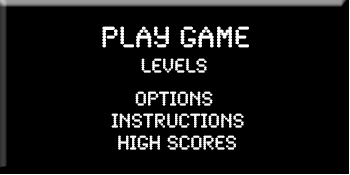
<style>
.page{position:relative;width:350px;height:175px;background:#000000}
.page>*{position:absolute;margin:0}
.t1{font:30px "SynchroLET";color:#ffffff}
.t2{font:20px "SynchroLET";color:#ffffff}
</style>
<div class="page">
<p class="t1" style="left:102px;top:26px;width:147px;height:22px">PLAY GAME</p>
<p class="t2" style="left:141px;top:58px;width:66px;height:15px">LEVELS</p>
<p class="t2" style="left:135px;top:91px;width:78px;height:15px">OPTIONS</p>
<p class="t2" style="left:111px;top:113px;width:133px;height:15px">INSTRUCTIONS</p>
<p class="t2" style="left:118px;top:135px;width:118px;height:15px">HIGH SCORES</p>
</div>
